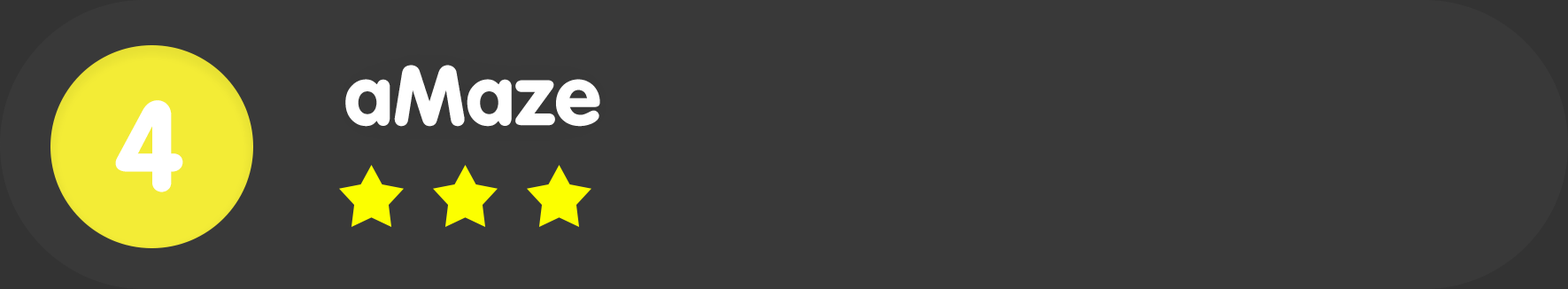
<style>
.page{position:relative;width:1568px;height:289px;background:#393939}
.page>*{position:absolute;margin:0}
.t1{font:88.5px "VAGRundschriftD";color:#ffffff}
.t2{font:132.8px "VAGRundschriftD";color:#ffffff}
</style>
<div class="page">
<p class="t1" style="left:345px;top:65px;width:255px;height:62px">aMaze</p>
<p class="t2" style="left:115px;top:100px;width:68px;height:92px">4</p>
</div>
